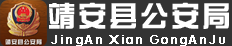
<style>
.page{position:relative;width:232px;height:46px;background:#333333}
.page>*{position:absolute;margin:0}
.t1{font:28px "ç»å¸ç»¼èºä½ç®-regular";letter-spacing:0.08em;color:#ffffff;font-weight:bold}
.t2{font:12px "Geometric212BT-BookCondensed";letter-spacing:0.1em;color:#ffffff;font-weight:bold}
</style>
<div class="page">
<p class="t1" style="left:49px;top:2px;width:180px;height:27px">靖安县公安局</p>
<p class="t2" style="left:51px;top:35px;width:174px;height:11px">JingAn Xian GongAnJu</p>
</div>
